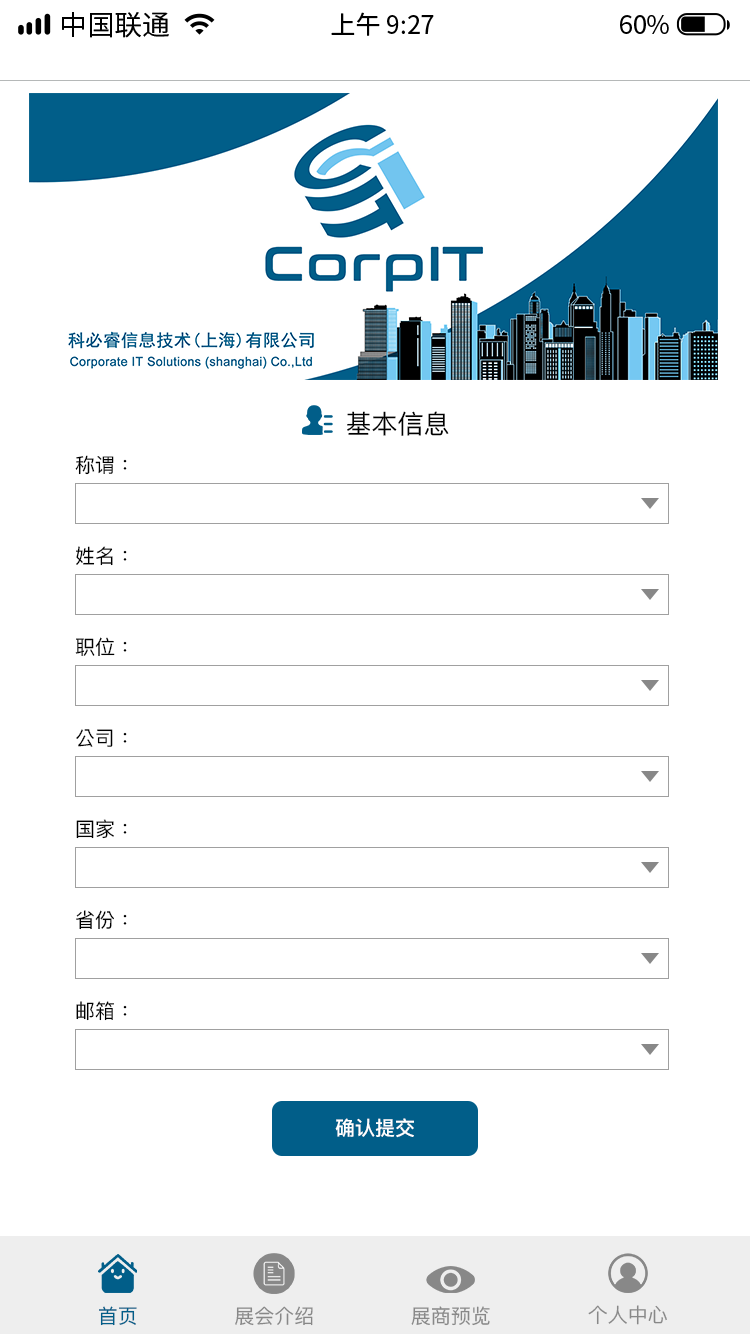
<style>
.page{position:relative;width:750px;height:1334px;background:#ffffff}
.page>*{position:absolute;margin:0}
.t1{font:27.8px "SourceHanSansCN-Regular";color:#000000}
.t2{font:25px "SourceHanSansCN-Regular";color:#000000}
.t3{font:26px "PingFangTC";color:#000000}
.t4{font:20px "PingFangTC";color:#000000}
.t5{font:20px "PingFang-SC-Bold";color:#ffffff}
.t6{font:20px "PingFangTC";color:#015e89}
.t7{font:20px "PingFangTC";color:#888888}
</style>
<div class="page">
<p class="t1" style="left:62px;top:12px;width:107px;height:26px">中国联通</p>
<p class="t2" style="left:331px;top:12px;width:103px;height:24px">上午 9:27</p>
<p class="t2" style="left:620px;top:15px;width:49px;height:19px">60%</p>
<p class="t3" style="left:347px;top:411px;width:102px;height:25px">基本信息</p>
<p class="t4" style="left:75px;top:455px;width:52px;height:20px">称谓：</p>
<p class="t4" style="left:76px;top:546px;width:51px;height:20px">姓名：</p>
<p class="t4" style="left:75px;top:637px;width:52px;height:19px">职位：</p>
<p class="t4" style="left:76px;top:729px;width:51px;height:18px">公司：</p>
<p class="t4" style="left:76px;top:819px;width:51px;height:20px">国家：</p>
<p class="t4" style="left:76px;top:910px;width:51px;height:20px">省份：</p>
<p class="t4" style="left:76px;top:1001px;width:51px;height:20px">邮箱：</p>
<p class="t5" style="left:335px;top:1118px;width:79px;height:20px">确认提交</p>
<p class="t6" style="left:99px;top:1306px;width:38px;height:20px">首页</p>
<p class="t7" style="left:235px;top:1306px;width:78px;height:20px">展会介绍</p>
<p class="t7" style="left:411px;top:1306px;width:79px;height:20px">展商预览</p>
<p class="t7" style="left:588px;top:1305px;width:79px;height:20px">个人中心</p>
</div>
